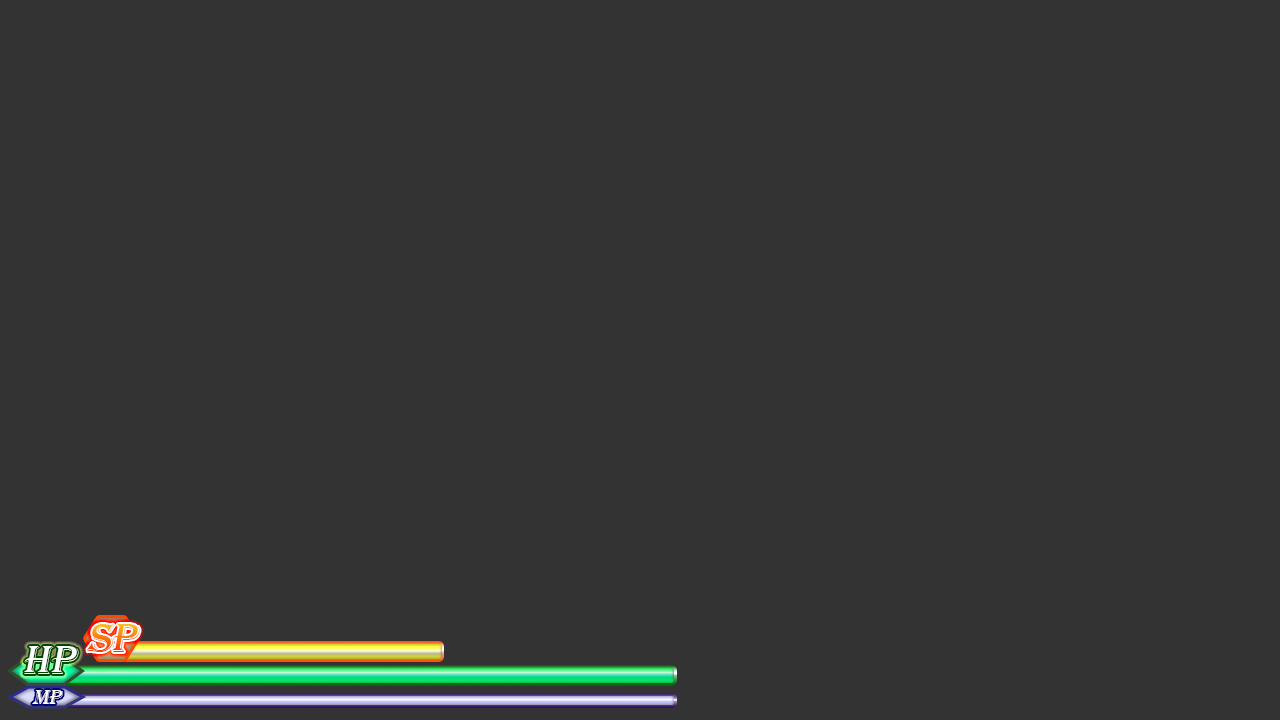
<style>
.page{position:relative;width:1280px;height:720px;background:#333333}
.page>*{position:absolute;margin:0}
.t1{font:41.7px "Algerian";letter-spacing:-0.025em;font-style:italic;scale:1.06 1}
.t2{font:41.7px "Algerian";letter-spacing:-0.025em;color:#ffffff;font-style:italic;scale:1.06 1}
.t3{font:20.8px "Algerian";letter-spacing:-0.025em;color:#ffffff;font-style:italic;scale:1.06 1}
</style>
<div class="page">
<p class="t1" style="left:87px;top:624px;width:53px;height:28px">SP</p>
<p class="t2" style="left:24px;top:646px;width:55px;height:28px">HP</p>
<p class="t3" style="left:32px;top:690px;width:31px;height:14px">MP</p>
</div>
